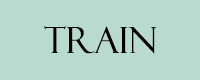
<style>
.page{position:relative;width:200px;height:80px;background:#b9dbcf}
.page>*{position:absolute;margin:0}
.t1{font:36px "FelixTitlingMT";color:#000000}
</style>
<div class="page">
<p class="t1" style="left:44px;top:26px;width:113px;height:28px">TRAIN</p>
</div>
